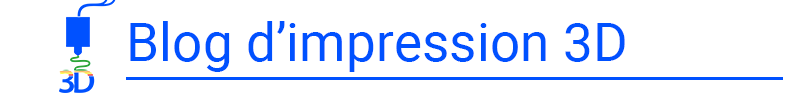
<style>
.page{position:relative;width:800px;height:100px;background:#ffffff}
.page>*{position:absolute;margin:0}
.t1{font:53.3px "Roboto-Regular";color:#0051ff}
</style>
<div class="page">
<p class="t1" style="left:130px;top:21px;width:495px;height:51px">Blog d’impression 3D</p>
</div>
